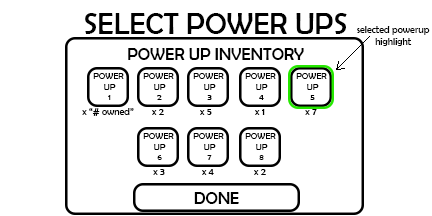
<style>
.page{position:relative;width:432px;height:216px;background:#ffffff}
.page>*{position:absolute;margin:0}
.t1{font:30px "BerlinSansFB-Reg";color:#000000}
.t2{font:10px "BerlinSansFB-Reg";color:#000000}
.t3{font:17px "BerlinSansFB-Reg";color:#000000}
.t4{font:9px "BerlinSansFB-Reg";color:#000000}
</style>
<div class="page">
<p class="t1" style="left:85px;top:13px;width:262px;height:21px">SELECT POWER UPS</p>
<p class="t2" style="left:357px;top:26px;width:73px;height:20px;text-align:center">selected powerup<br>highlight</p>
<p class="t3" style="left:128px;top:48px;width:176px;height:12px">POWER UP INVENTORY</p>
<p class="t4" style="left:93px;top:73px;width:31px;height:27px;text-align:center">POWER <br>UP<br>1</p>
<p class="t4" style="left:143px;top:73px;width:31px;height:27px;text-align:center">POWER <br>UP<br>2</p>
<p class="t4" style="left:193px;top:73px;width:31px;height:27px;text-align:center">POWER <br>UP<br>3</p>
<p class="t4" style="left:245px;top:73px;width:31px;height:27px;text-align:center">POWER <br>UP<br>4</p>
<p class="t4" style="left:296px;top:73px;width:31px;height:27px;text-align:center">POWER <br>UP<br>5</p>
<p class="t2" style="left:82px;top:108px;width:52px;height:8px">x “# owned”</p>
<p class="t2" style="left:152px;top:109px;width:12px;height:6px">x 2</p>
<p class="t2" style="left:200px;top:109px;width:12px;height:6px">x 5</p>
<p class="t2" style="left:255px;top:109px;width:10px;height:6px">x 1</p>
<p class="t2" style="left:305px;top:109px;width:12px;height:6px">x 7</p>
<p class="t4" style="left:143px;top:133px;width:31px;height:27px;text-align:center">POWER <br>UP<br>6</p>
<p class="t4" style="left:193px;top:133px;width:31px;height:27px;text-align:center">POWER <br>UP<br>7</p>
<p class="t4" style="left:245px;top:133px;width:31px;height:27px;text-align:center">POWER <br>UP<br>8</p>
<p class="t2" style="left:153px;top:169px;width:12px;height:6px">x 3</p>
<p class="t2" style="left:202px;top:169px;width:12px;height:6px">x 4</p>
<p class="t2" style="left:254px;top:169px;width:12px;height:6px">x 2</p>
<p class="t3" style="left:194px;top:192px;width:45px;height:12px">DONE</p>
</div>
